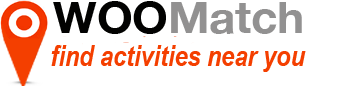
<style>
.page{position:relative;width:343px;height:86px;background:#ffffff}
.page>*{position:absolute;margin:0}
.t1{font:28.6px "ArialNarrow-BoldItalic";color:#f43f00}
</style>
<div class="page">
<p class="t1" style="left:51px;top:45px;width:255px;height:27px">find activities near you</p>
</div>
